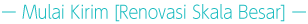
<style>
.page{position:relative;width:308px;height:24px;background:#ffffff}
.page>*{position:absolute;margin:0}
.t1{font:18px "UDShinGoPro-Light";color:#1dbcc0;scale:0.88 1}
</style>
<div class="page">
<p class="t1" style="left:2px;top:4px;width:304px;height:18px">ー Mulai Kirim [Renovasi Skala Besar] ー</p>
</div>
